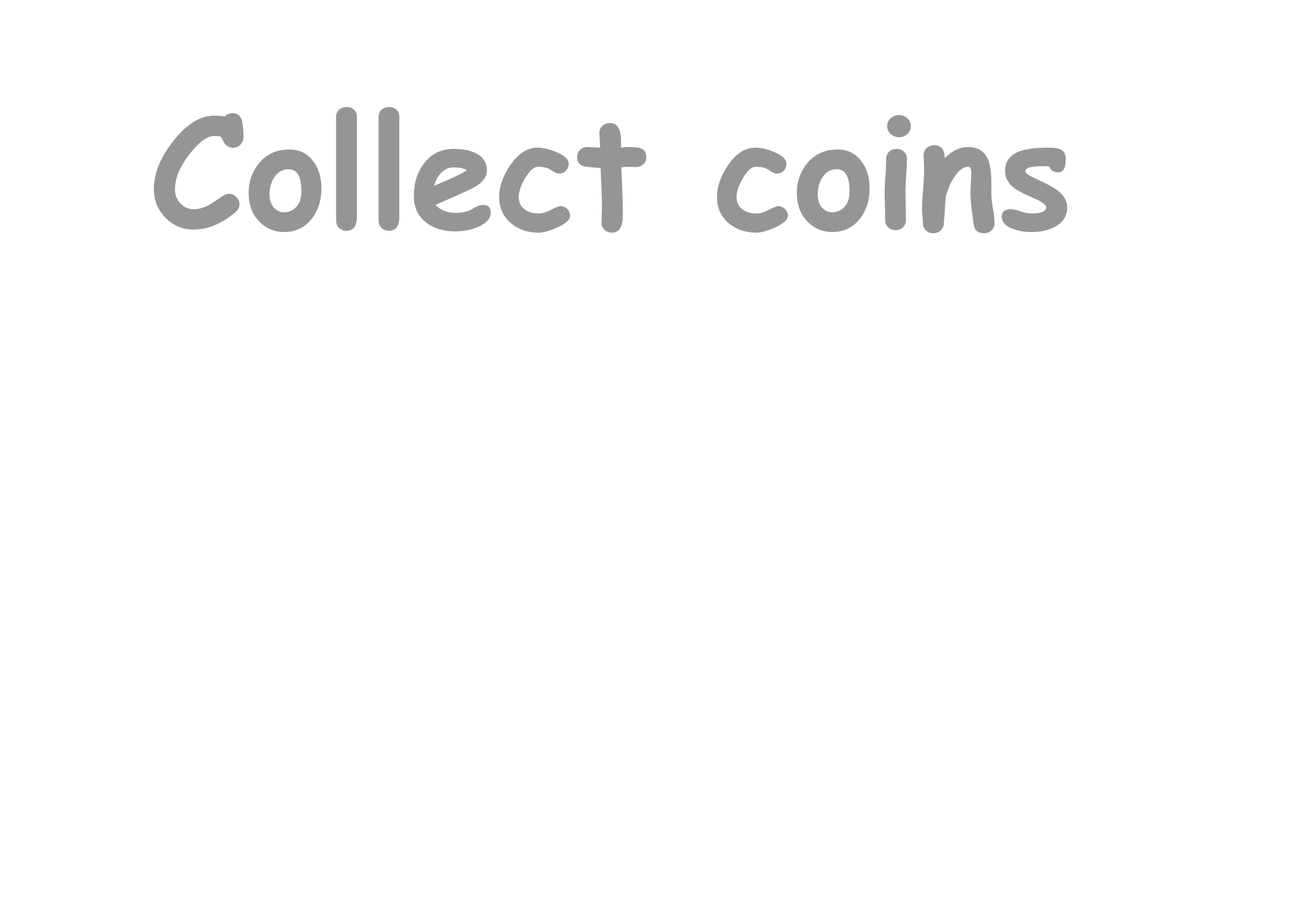
<style>
.page{position:relative;width:1292px;height:923px;background:#ffffff}
.page>*{position:absolute;margin:0}
.t1{font:153.8px "ComicSansMS-Bold";color:#959595}
</style>
<div class="page">
<p class="t1" style="left:154px;top:107px;width:913px;height:126px">Collect coins</p>
</div>
